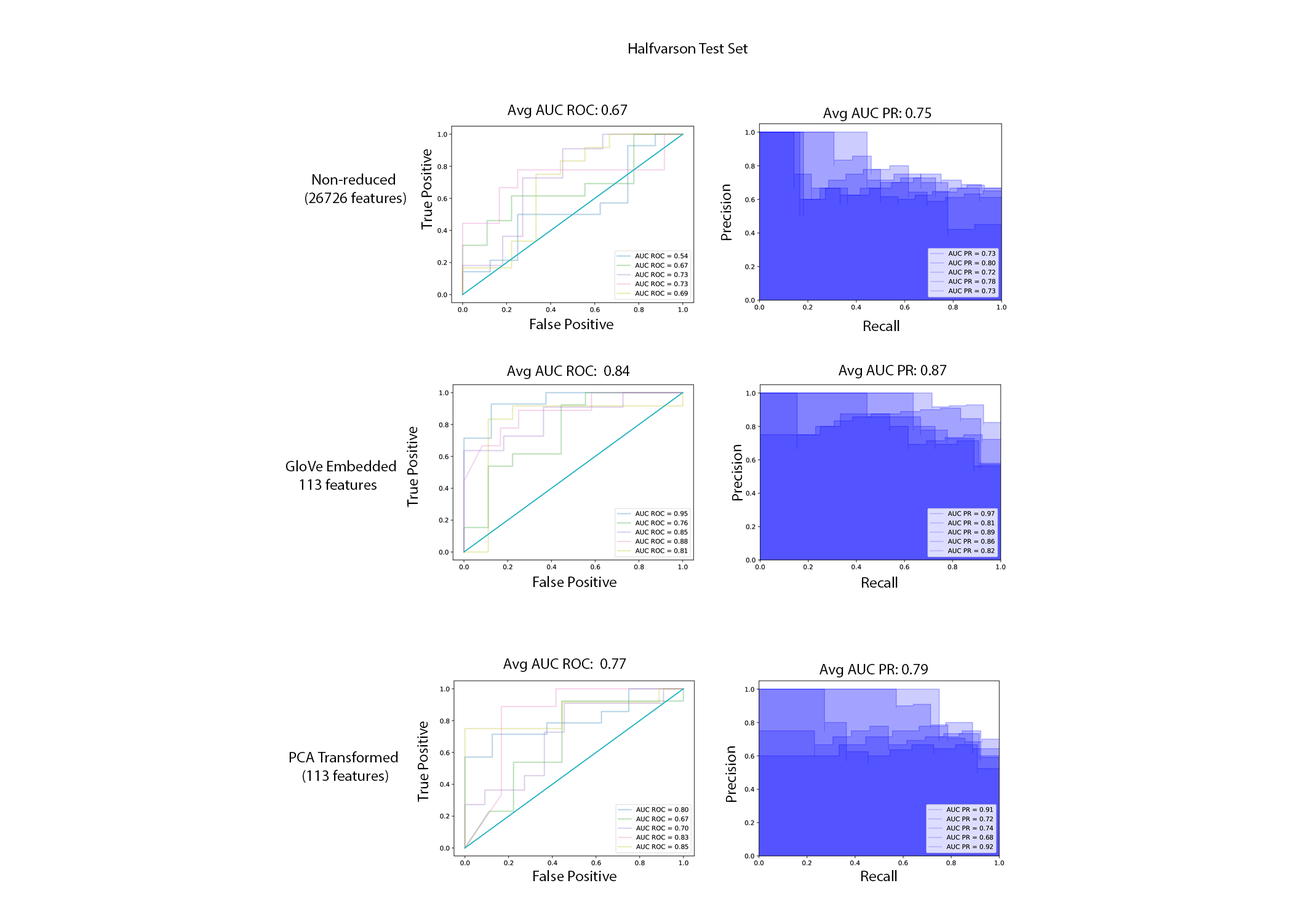
<style>
.page{position:relative;width:1292px;height:923px;background:#ffffff}
.page>*{position:absolute;margin:0}
.t1{font:15.4px "MyriadPro-Regular";color:#000000}
</style>
<div class="page">
<p class="t1" style="left:629px;top:42px;width:119px;height:12px">Halfvarson Test Set</p>
<p class="t1" style="left:508px;top:105px;width:120px;height:13px">Avg AUC ROC: 0.67</p>
<p class="t1" style="left:823px;top:108px;width:109px;height:13px">Avg AUC PR: 0.75</p>
<p class="t1" style="left:421px;top:149px;width:12px;height:81px;rotate:-91deg">True Positive</p>
<p class="t1" style="left:305px;top:174px;width:101px;height:31px;text-align:center">Non-reduced<br> (26726 features)</p>
<p class="t1" style="left:720px;top:185px;width:12px;height:56px;rotate:-91deg">Precision</p>
<p class="t1" style="left:530px;top:318px;width:83px;height:11px">False Positive</p>
<p class="t1" style="left:864px;top:320px;width:36px;height:11px">Recall</p>
<p class="t1" style="left:507px;top:365px;width:123px;height:14px">Avg AUC ROC:  0.84</p>
<p class="t1" style="left:839px;top:365px;width:108px;height:13px">Avg AUC PR: 0.87</p>
<p class="t1" style="left:407px;top:426px;width:11px;height:82px;rotate:-91deg">True Positive</p>
<p class="t1" style="left:732px;top:445px;width:11px;height:56px;rotate:-91deg">Precision</p>
<p class="t1" style="left:285px;top:460px;width:111px;height:30px;text-align:center">GloVe Embedded<br> 113 features</p>
<p class="t1" style="left:533px;top:576px;width:83px;height:11px">False Positive</p>
<p class="t1" style="left:862px;top:577px;width:36px;height:11px">Recall</p>
<p class="t1" style="left:503px;top:658px;width:123px;height:14px">Avg AUC ROC:  0.77</p>
<p class="t1" style="left:820px;top:664px;width:108px;height:13px">Avg AUC PR: 0.79</p>
<p class="t1" style="left:417px;top:721px;width:12px;height:81px;rotate:-91deg">True Positive</p>
<p class="t1" style="left:725px;top:746px;width:11px;height:56px;rotate:-91deg">Precision</p>
<p class="t1" style="left:289px;top:751px;width:109px;height:32px;text-align:center">PCA Transformed<br> (113 features)</p>
<p class="t1" style="left:533px;top:870px;width:83px;height:11px">False Positive</p>
<p class="t1" style="left:861px;top:870px;width:36px;height:11px">Recall</p>
</div>
